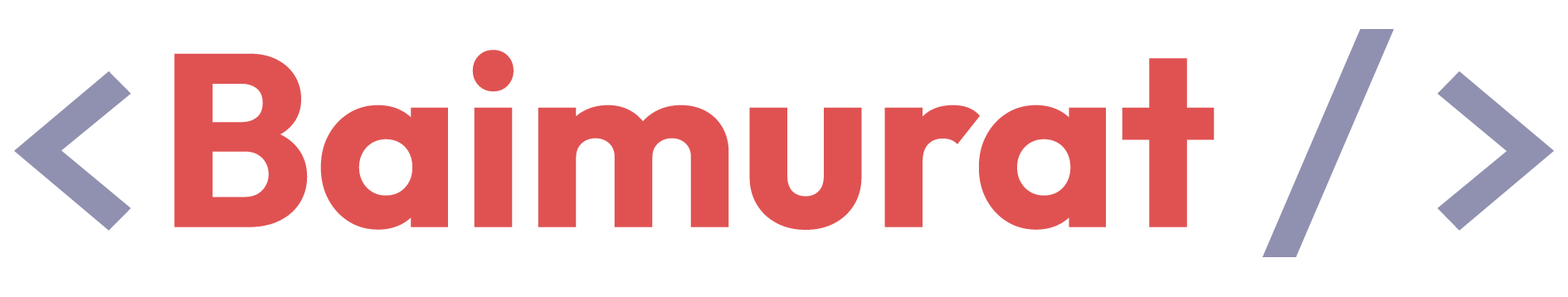
<style>
.page{position:relative;width:1568px;height:297px;background:#ffffff}
.page>*{position:absolute;margin:0}
.t1{font:245.4px "Outfit-Bold";color:#e05252}
.t2{font:286.9px "Consolas-Bold";color:#9090b0}
</style>
<div class="page">
<p class="t1" style="left:14px;top:29px;width:1540px;height:228px"><span class="t2">&lt;</span>Baimurat <span class="t2">/&gt;</span></p>
</div>
